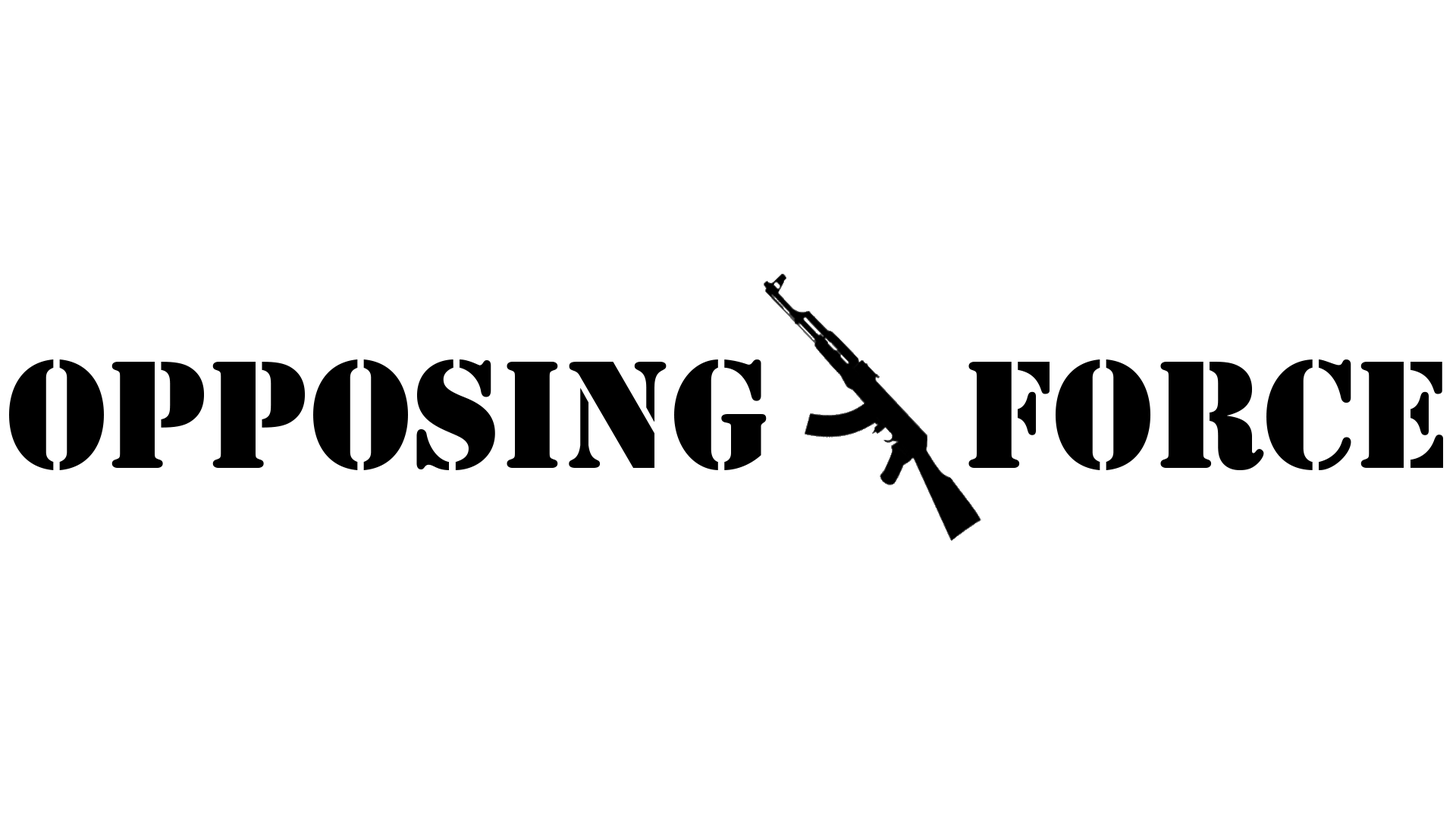
<style>
.page{position:relative;width:1456px;height:819px;background:#ffffff}
.page>*{position:absolute;margin:0}
.t1{font:141.9px "StencilStd";color:#000000}
</style>
<div class="page">
<p class="t1" style="left:9px;top:359px;width:1434px;height:111px">OPPOSING    FORCE</p>
</div>
